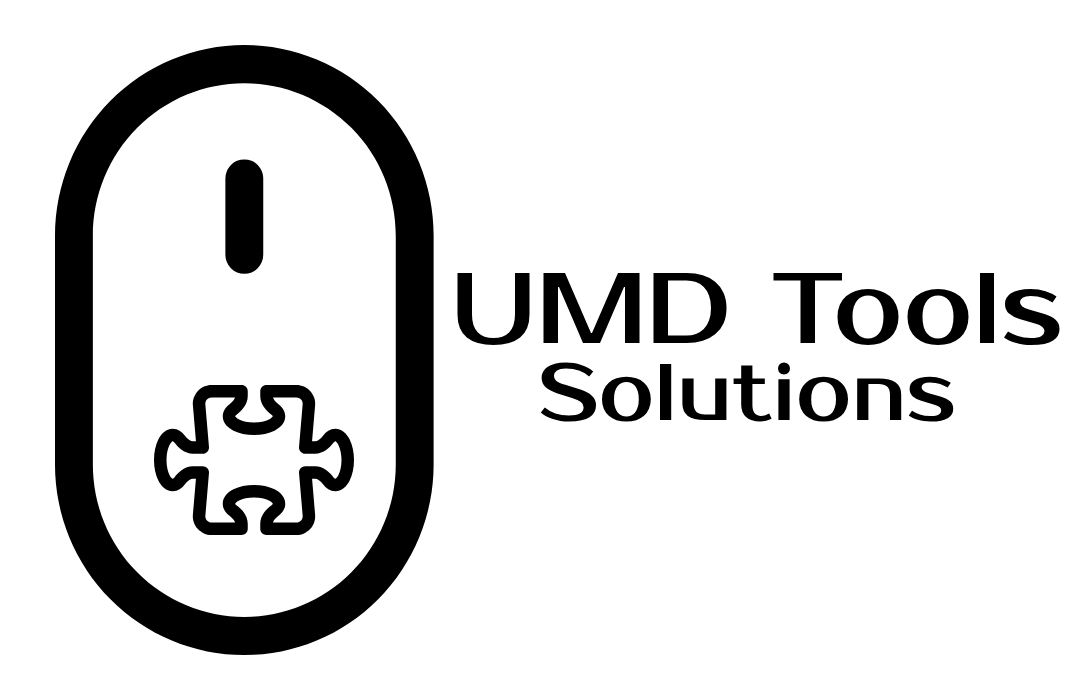
<style>
.page{position:relative;width:1080px;height:700px;background:#ffffff}
.page>*{position:absolute;margin:0}
.t1{font:100px "ProstoOne-Regular";color:#000000}
.t2{font:80px "ProstoOne-Regular";color:#000000}
</style>
<div class="page">
<p class="t1" style="left:457px;top:273px;width:603px;height:72px">UMD Tools</p>
<p class="t2" style="left:540px;top:362px;width:414px;height:60px">Solutions</p>
</div>
